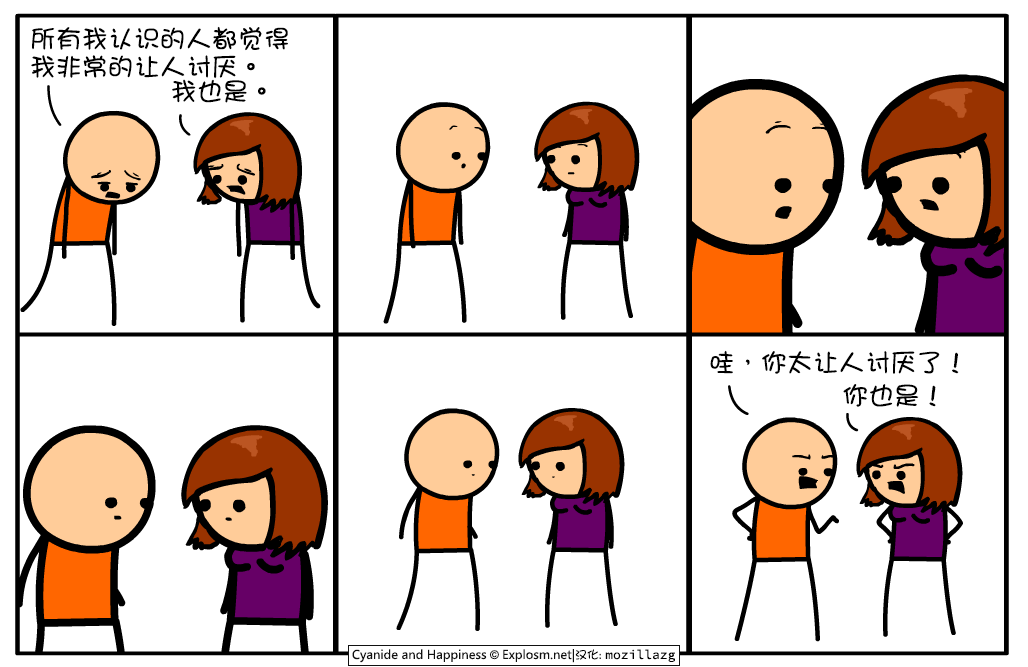
<style>
.page{position:relative;width:1028px;height:667px;background:#ffffff}
.page>*{position:absolute;margin:0}
.t1{font:26px/28px "DFGirl";color:#000000}
.t2{font:26px "DFGirl";color:#000000}
</style>
<div class="page">
<p class="t1" style="left:31px;top:26px;width:257px;height:53px">所有我认识的人都觉得<br>我非常的让人讨厌。</p>
<p class="t2" style="left:172px;top:79px;width:94px;height:24px">我也是。</p>
<p class="t2" style="left:710px;top:350px;width:249px;height:24px">哇，你太让人讨厌了！</p>
<p class="t2" style="left:843px;top:384px;width:93px;height:23px">你也是！</p>
</div>
